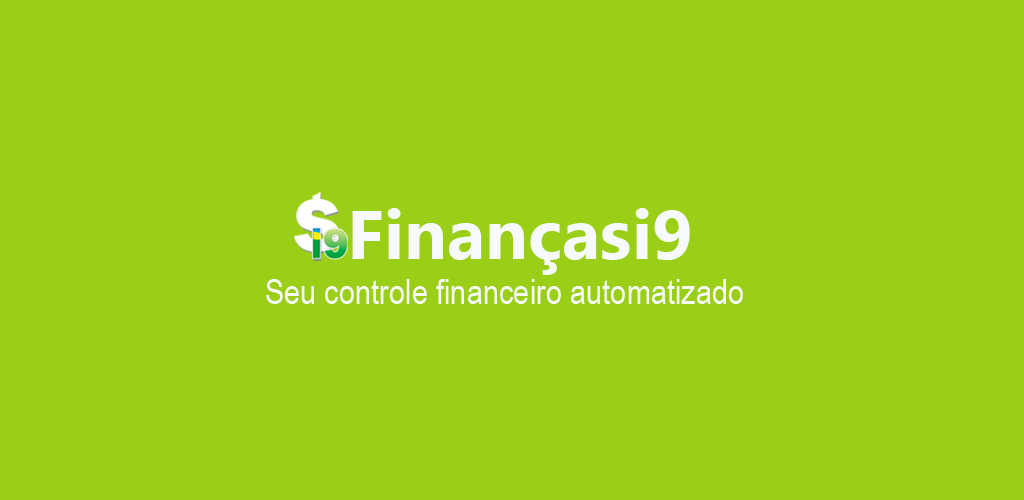
<style>
.page{position:relative;width:1024px;height:500px;background:#9bcf17}
.page>*{position:absolute;margin:0}
.t1{font:69.2px "LaoUI-Bold";color:#f7fafc}
.t2{font:34.6px "ArialNarrow";color:#f7fafc}
</style>
<div class="page">
<p class="t1" style="left:352px;top:208px;width:338px;height:67px">Finançasi9</p>
<p class="t2" style="left:266px;top:279px;width:477px;height:25px">Seu controle financeiro automatizado</p>
</div>
